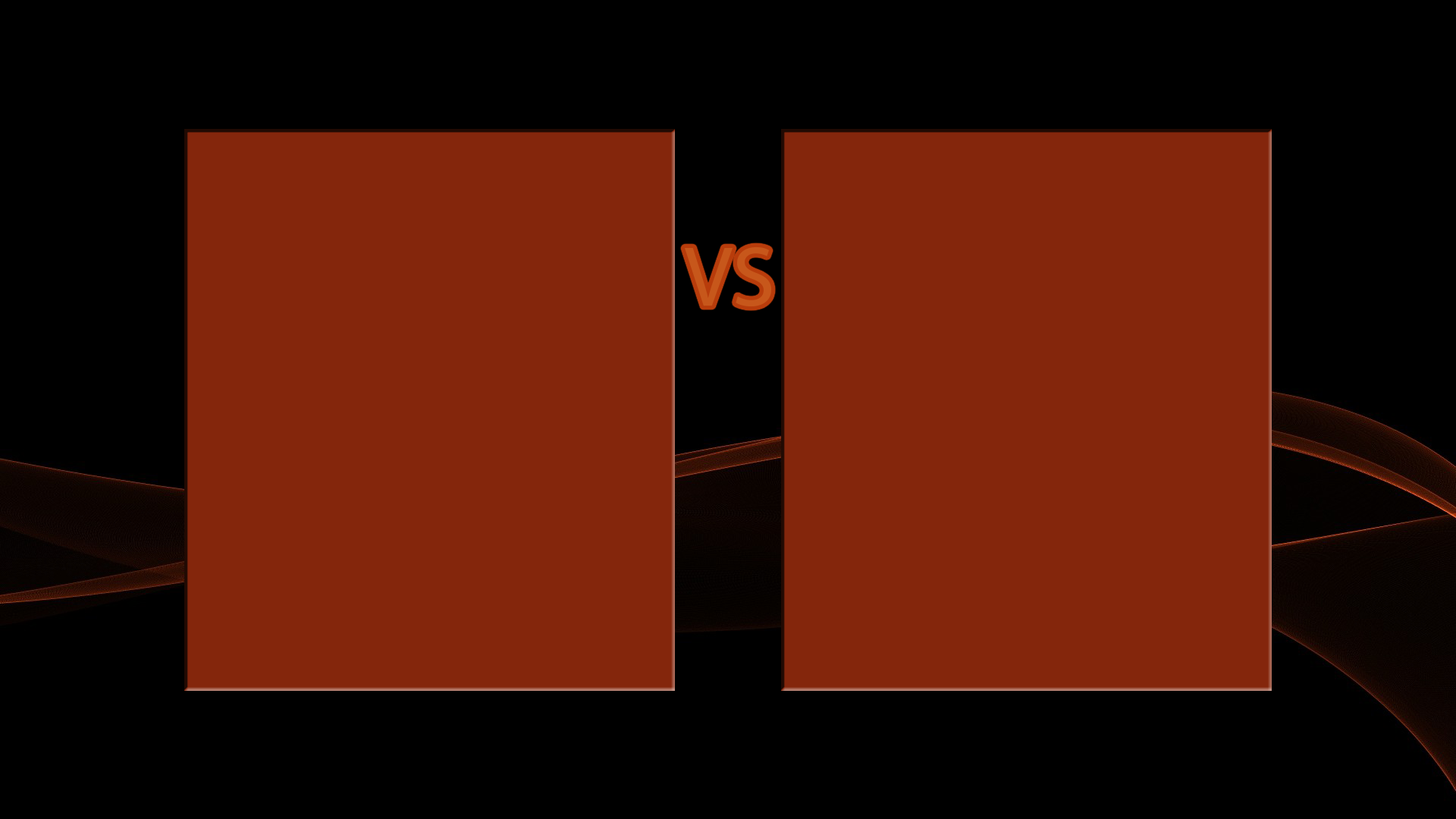
<style>
.page{position:relative;width:1456px;height:819px;background:#000000}
.page>*{position:absolute;margin:0}
.t1{font:85.7px "MyriadPro-Regular";color:#c7571b}
</style>
<div class="page">
<p class="t1" style="left:685px;top:246px;width:86px;height:61px">VS</p>
</div>
